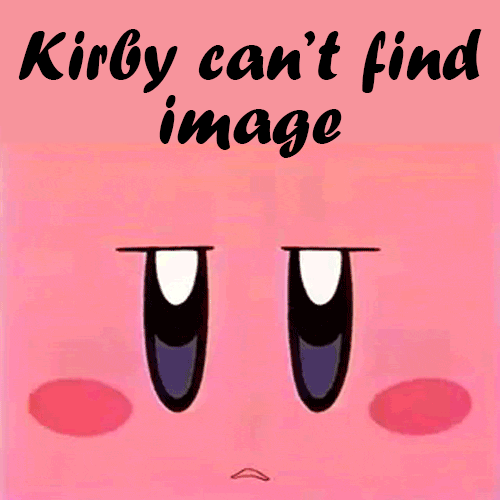
<style>
.page{position:relative;width:500px;height:500px;background:#f7949c}
.page>*{position:absolute;margin:0}
.t1{font:72px/64px "ForteMT";color:#000000}
</style>
<div class="page">
<p class="t1" style="left:18px;top:29px;width:464px;height:129px;text-align:center">Kirby can’t find image</p>
</div>
